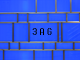
<style>
.page{position:relative;width:80px;height:60px}
.page>*{position:absolute;margin:0}
.t1{font:9.8px "Terminal";color:#000000}
</style>
<div class="page">
<p class="t1" style="left:32px;top:28px;width:20px;height:7px">3AG</p>
</div>
